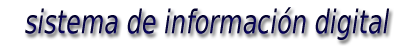
<style>
.page{position:relative;width:417px;height:50px;background:#ffffff}
.page>*{position:absolute;margin:0}
.t1{font:32.4px "DejaVuSans-Oblique";color:#050242;scale:0.74 1}
</style>
<div class="page">
<p class="t1" style="left:25px;top:7px;width:365px;height:33px">sistema de información digital</p>
</div>
